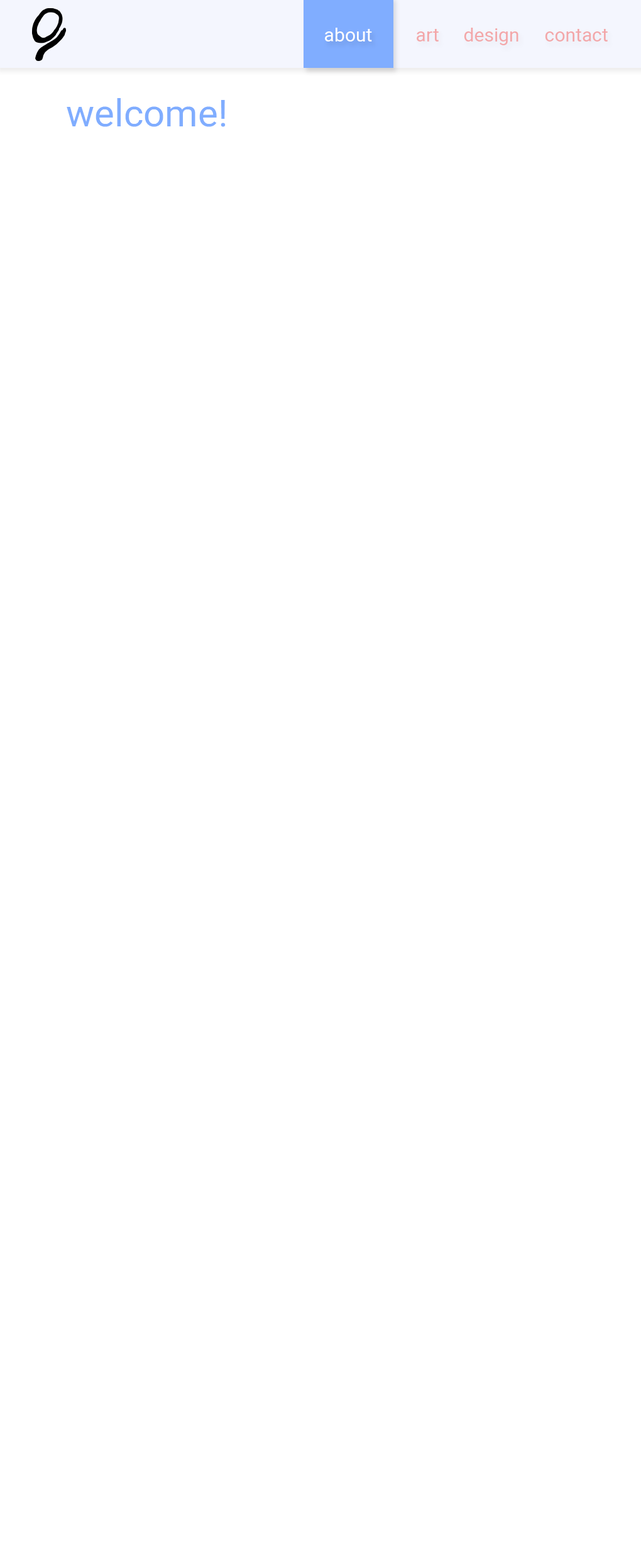
<style>
.page{position:relative;width:641px;height:1568px;background:#ffffff}
.page>*{position:absolute;margin:0}
.t1{font:18.9px "Heebo-Regular";color:#ffffff}
.t2{font:18.9px "Heebo-Regular";color:#f3a7a9}
.t3{font:37.7px "Heebo-Regular";color:#80adff}
</style>
<div class="page">
<p class="t1" style="left:325px;top:28px;width:47px;height:13px">about</p>
<p class="t2" style="left:417px;top:29px;width:22px;height:12px">art</p>
<p class="t2" style="left:464px;top:28px;width:55px;height:17px">design</p>
<p class="t2" style="left:545px;top:29px;width:63px;height:12px">contact</p>
<p class="t3" style="left:67px;top:98px;width:159px;height:29px">welcome!</p>
</div>
